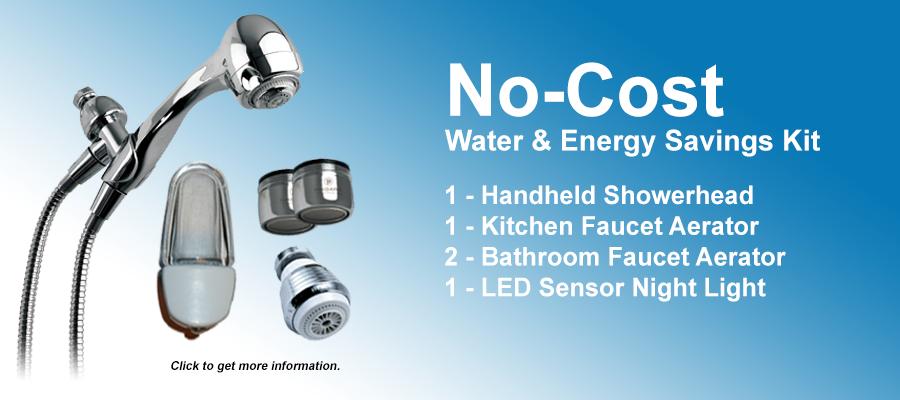
<style>
.page{position:relative;width:900px;height:400px}
.page>*{position:absolute;margin:0}
.t1{font:29px "Arial-BoldMT";color:#ffffff}
.t2{font:73px "Arial-BoldMT";color:#ffffff}
.t3{font:25.6px "Arial-BoldMT";color:#ffffff}
.t4{font:12px "Arial-BoldMT";color:#000000;font-style:italic}
</style>
<div class="page">
<p class="t1" style="left:445px;top:62px;width:375px;height:95px"><span class="t2">No-Cost<br></span>Water &amp; Energy Savings Kit</p>
<p class="t3" style="left:445px;top:185px;width:341px;height:117px">1 - Handheld Showerhead<br>1 - Kitchen Faucet Aerator<br>2 - Bathroom Faucet Aerator<br>1 - LED Sensor Night Light</p>
<p class="t4" style="left:171px;top:361px;width:169px;height:12px">Click to get more information.</p>
</div>
